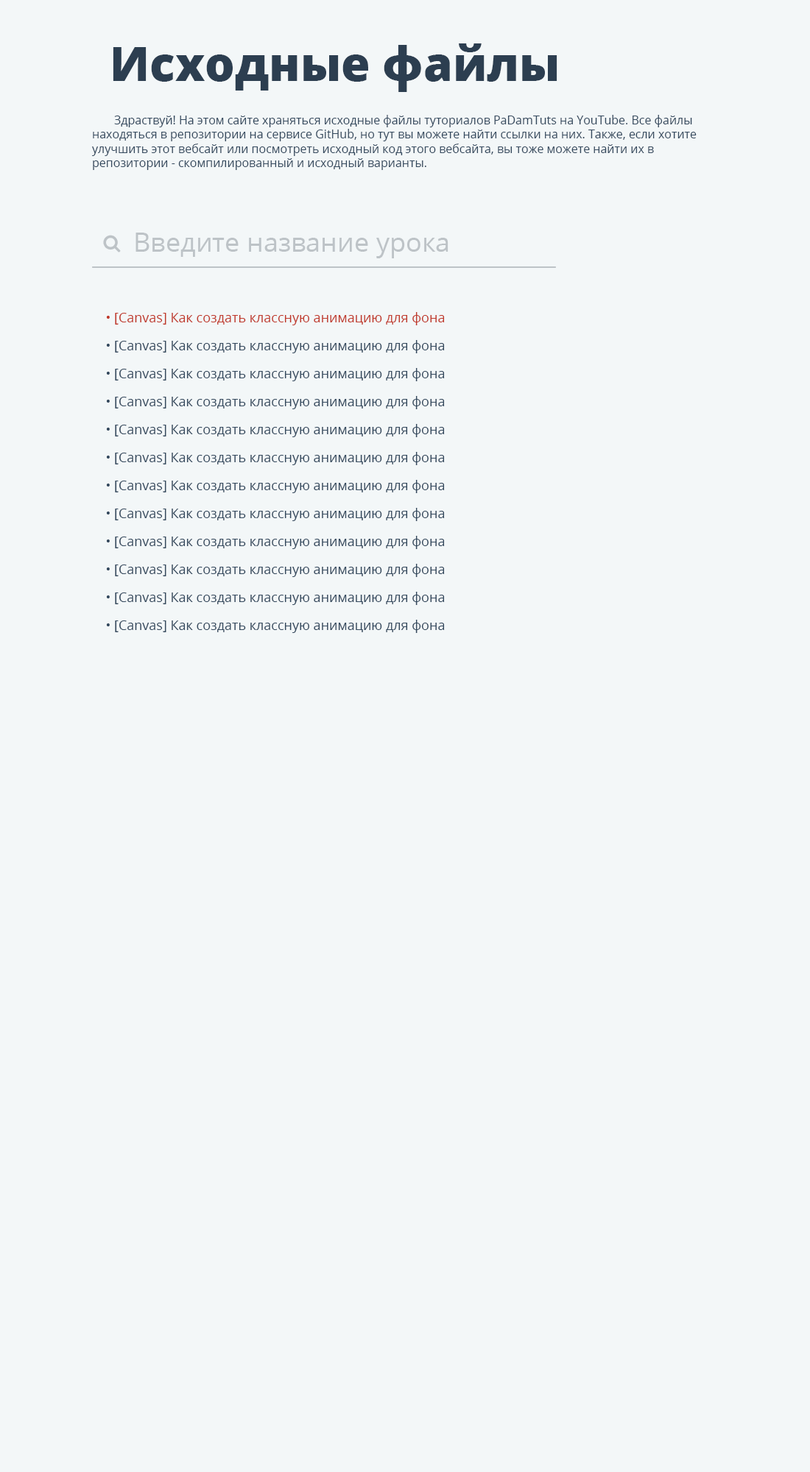
<style>
.page{position:relative;width:810px;height:1472px;background:#f3f7f8}
.page>*{position:absolute;margin:0}
.t1{font:47.1px "OpenSans-Extrabold";color:#2c3e50}
.t2{font:11.8px "OpenSans";color:#34495e}
.t3{font:26.5px "OpenSans";color:#bdc3c7}
.t4{font:13.3px "OpenSans";color:#c0392b}
.t5{font:13.3px "OpenSans";color:#34495e}
</style>
<div class="page">
<p class="t1" style="left:113px;top:43px;width:444px;height:49px">Исходные файлы</p>
<p class="t2" style="left:92px;top:115px;width:604px;height:55px">Здраствуй! На этом сайте храняться исходные файлы туториалов PaDamTuts на YouTube. Все файлы находяться в репозитории на сервисе GitHub, но тут вы можете найти ссылки на них. Также, если хотите улучшить этот вебсайт или посмотреть исходный код этого вебсайта, вы тоже можете найти их в репозитории - скомпилированный и исходный варианты.</p>
<p class="t3" style="left:135px;top:233px;width:313px;height:25px">Введите название урока</p>
<p class="t4" style="left:106px;top:312px;width:339px;height:13px">• [Canvas] Как создать классную анимацию для фона</p>
<p class="t5" style="left:106px;top:340px;width:339px;height:13px">• [Canvas] Как создать классную анимацию для фона</p>
<p class="t5" style="left:106px;top:368px;width:339px;height:13px">• [Canvas] Как создать классную анимацию для фона</p>
<p class="t5" style="left:106px;top:396px;width:339px;height:13px">• [Canvas] Как создать классную анимацию для фона</p>
<p class="t5" style="left:106px;top:424px;width:339px;height:13px">• [Canvas] Как создать классную анимацию для фона</p>
<p class="t5" style="left:106px;top:452px;width:339px;height:13px">• [Canvas] Как создать классную анимацию для фона</p>
<p class="t5" style="left:106px;top:480px;width:339px;height:13px">• [Canvas] Как создать классную анимацию для фона</p>
<p class="t5" style="left:106px;top:508px;width:339px;height:13px">• [Canvas] Как создать классную анимацию для фона</p>
<p class="t5" style="left:106px;top:536px;width:339px;height:13px">• [Canvas] Как создать классную анимацию для фона</p>
<p class="t5" style="left:106px;top:564px;width:339px;height:13px">• [Canvas] Как создать классную анимацию для фона</p>
<p class="t5" style="left:106px;top:592px;width:339px;height:13px">• [Canvas] Как создать классную анимацию для фона</p>
<p class="t5" style="left:106px;top:620px;width:339px;height:13px">• [Canvas] Как создать классную анимацию для фона</p>
</div>
